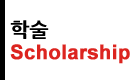
<style>
.page{position:relative;width:130px;height:80px;background:#ffffff}
.page>*{position:absolute;margin:0}
.t1{font:20px/24px "Arial-BoldMT";color:#dc241f;font-weight:bold}
.t2{font:20px/24px "NanumGothicBold";color:#000000;font-weight:bold}
</style>
<div class="page">
<p class="t1" style="left:10px;top:20px;width:120px;height:44px"><span class="t2">학술<br></span>Scholarship</p>
</div>
